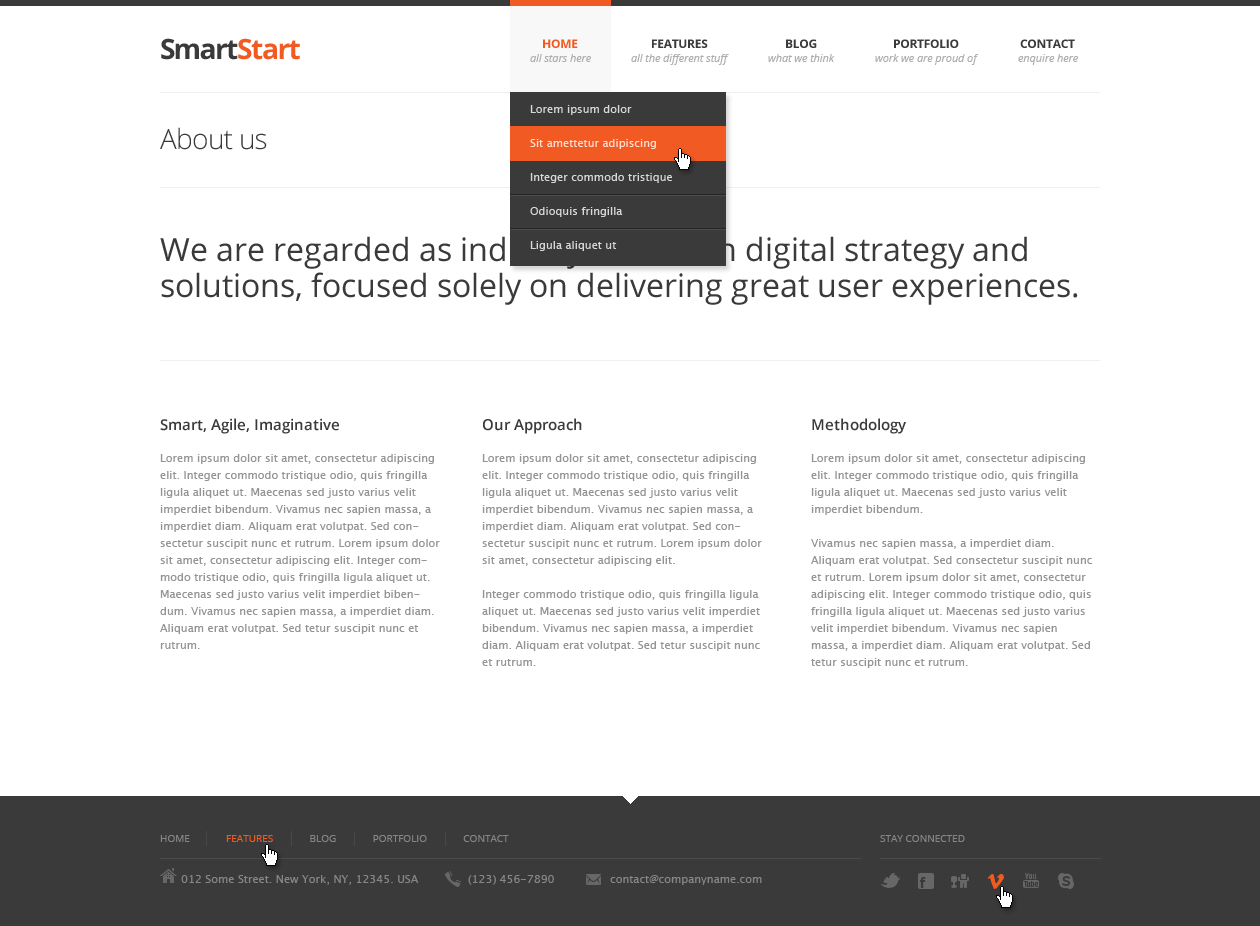
<style>
.page{position:relative;width:1260px;height:926px;background:#ffffff}
.page>*{position:absolute;margin:0}
.t1{font:28px "OpenSans-Bold";letter-spacing:-0.05em;color:#f15a23}
.t2{font:28px "OpenSans-Bold";letter-spacing:-0.075em;color:#3a3a3a}
.t3{font:28px "OpenSans-Bold";letter-spacing:-0.05em;color:#3a3a3a}
.t4{font:12px "OpenSans-Bold";letter-spacing:-0.025em;color:#f15a23;text-transform:uppercase}
.t5{font:12px "OpenSans-Bold";letter-spacing:-0.025em;color:#3a3a3a;text-transform:uppercase}
.t6{font:11px "OpenSans-Italic";letter-spacing:-0.01em;color:#aeaeae}
.t7{font:11px/34px "LucidaSans";color:#d8d8d8}
.t8{font:28px "OpenSans-Light";letter-spacing:-0.025em;color:#3a3a3a}
.t9{font:32px/36px "OpenSans";color:#3a3a3a}
.t10{font:15px "OpenSans-Semibold";color:#3a3a3a}
.t11{font:11px/17px "LucidaSans";color:#959393}
.t12{font:10px "OpenSans";color:#868686;text-transform:uppercase}
.t13{font:10px "OpenSans";color:#f15a23;text-transform:uppercase}
.t14{font:11px "LucidaSans";color:#868686}
</style>
<div class="page">
<p class="t1" style="left:161px;top:38px;width:139px;height:22px"><span class="t2">S</span><span class="t3">mart</span>Start</p>
<p class="t4" style="left:543px;top:39px;width:35px;height:9px">Home</p>
<p class="t5" style="left:652px;top:39px;width:56px;height:9px">Features</p>
<p class="t5" style="left:786px;top:39px;width:31px;height:9px">Blog</p>
<p class="t5" style="left:894px;top:39px;width:65px;height:9px">Portfolio</p>
<p class="t5" style="left:1020px;top:39px;width:55px;height:9px">Contact</p>
<p class="t6" style="left:530px;top:54px;width:61px;height:8px">all stars here</p>
<p class="t6" style="left:631px;top:54px;width:98px;height:11px">all the different stuff</p>
<p class="t6" style="left:768px;top:54px;width:67px;height:8px">what we think</p>
<p class="t6" style="left:875px;top:54px;width:104px;height:11px">work we are proud of</p>
<p class="t6" style="left:1018px;top:54px;width:60px;height:11px">enquire here</p>
<p class="t7" style="left:530px;top:105px;width:142px;height:146px">Lorem ipsum dolor <br>Sit amettetur adipiscing<br>Integer commodo tristique <br>Odioquis fringilla <br>Ligula aliquet ut</p>
<p class="t8" style="left:160px;top:127px;width:107px;height:23px">About us</p>
<p class="t9" style="left:160px;top:236px;width:918px;height:69px">We are regarded as industry leaders in digital strategy and solutions, focused solely on delivering great user experiences.</p>
<p class="t10" style="left:160px;top:418px;width:179px;height:16px">Smart, Agile, Imaginative</p>
<p class="t10" style="left:483px;top:418px;width:99px;height:16px">Our Approach</p>
<p class="t10" style="left:812px;top:418px;width:94px;height:16px">Methodology</p>
<p class="t11" style="left:160px;top:454px;width:280px;height:195px">Lorem ipsum dolor sit amet, consectetur adipiscing elit. Integer commodo tristique odio, quis fringilla ligula aliquet ut. Maecenas sed justo varius velit imperdiet bibendum. Vivamus nec sapien massa, a imperdiet diam. Aliquam erat volutpat. Sed consectetur suscipit nunc et rutrum. Lorem ipsum dolor sit amet, consectetur adipiscing elit. Integer commodo tristique odio, quis fringilla ligula aliquet ut. Maecenas sed justo varius velit imperdiet bibendum. Vivamus nec sapien massa, a imperdiet diam. Aliquam erat volutpat. Sed tetur suscipit nunc et rutrum.</p>
<p class="t11" style="left:482px;top:454px;width:280px;height:212px">Lorem ipsum dolor sit amet, consectetur adipiscing elit. Integer commodo tristique odio, quis fringilla ligula aliquet ut. Maecenas sed justo varius velit imperdiet bibendum. Vivamus nec sapien massa, a imperdiet diam. Aliquam erat volutpat. Sed consectetur suscipit nunc et rutrum. Lorem ipsum dolor sit amet, consectetur adipiscing elit.<br><br>Integer commodo tristique odio, quis fringilla ligula aliquet ut. Maecenas sed justo varius velit imperdiet bibendum. Vivamus nec sapien massa, a imperdiet diam. Aliquam erat volutpat. Sed tetur suscipit nunc et rutrum.</p>
<p class="t11" style="left:811px;top:454px;width:281px;height:214px">Lorem ipsum dolor sit amet, consectetur adipiscing elit. Integer commodo tristique odio, quis fringilla ligula aliquet ut. Maecenas sed justo varius velit imperdiet bibendum. <br><br>Vivamus nec sapien massa, a imperdiet diam. Aliquam erat volutpat. Sed consectetur suscipit nunc et rutrum. Lorem ipsum dolor sit amet, consectetur adipiscing elit. Integer commodo tristique odio, quis fringilla ligula aliquet ut. Maecenas sed justo varius velit imperdiet bibendum. Vivamus nec sapien massa, a imperdiet diam. Aliquam erat volutpat. Sed tetur suscipit nunc et rutrum.</p>
<p class="t12" style="left:160px;top:835px;width:349px;height:7px">Home              <span class="t13">Features</span>              Blog              Portfolio              Contact</p>
<p class="t12" style="left:880px;top:835px;width:85px;height:7px">Stay connected</p>
<p class="t14" style="left:181px;top:875px;width:238px;height:10px">012 Some Street. New York, NY, 12345. USA</p>
<p class="t14" style="left:468px;top:875px;width:86px;height:10px">(123) 456-7890</p>
<p class="t14" style="left:610px;top:875px;width:152px;height:10px">contact@companyname.com</p>
</div>
